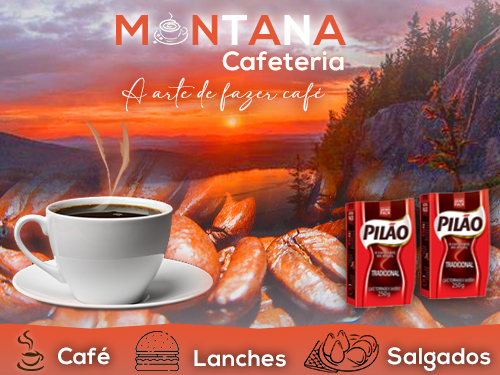
<style>
.page{position:relative;width:500px;height:375px}
.page>*{position:absolute;margin:0}
.t1{font:42.8px "NexaBold";letter-spacing:0.02em;color:#e35636}
.t2{font:42.8px "NexaBold";letter-spacing:0.02em;color:#ffffff}
.t3{font:26.4px "NexaBold";letter-spacing:0.02em;color:#fffffe}
.t4{font:17px "adelia";letter-spacing:0.02em;color:#fff7f5}
.t5{font:23px "NexaBold";letter-spacing:0.02em;color:#ffffff}
</style>
<div class="page">
<p class="t1" style="left:116px;top:15px;width:230px;height:30px">M    N<span class="t2">T</span>A<span class="t2">N</span>A</p>
<p class="t3" style="left:222px;top:51px;width:122px;height:20px">Cafeteria</p>
<p class="t4" style="left:122px;top:77px;width:203px;height:35px">A arte de fazer café</p>
<p class="t5" style="left:58px;top:347px;width:52px;height:18px">Café</p>
<p class="t5" style="left:194px;top:350px;width:92px;height:17px">Lanches</p>
<p class="t5" style="left:387px;top:347px;width:104px;height:24px">Salgados</p>
</div>
